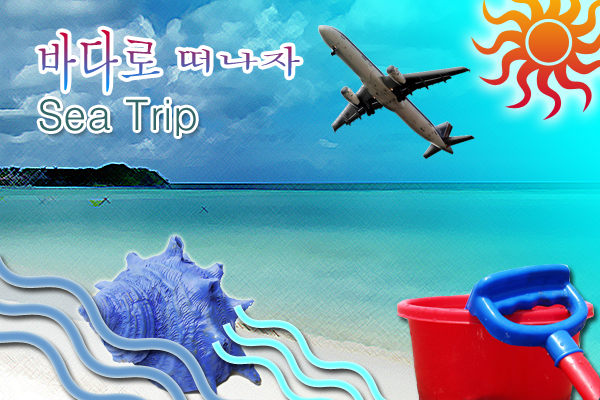
<style>
.page{position:relative;width:600px;height:400px}
.page>*{position:absolute;margin:0}
.t1{font:42px "Batang"}
.t2{font:42px "Dotum";color:#336666}
</style>
<div class="page">
<p class="t1" style="left:38px;top:29px;width:262px;height:63px">바다로 떠나자</p>
<p class="t2" style="left:39px;top:99px;width:157px;height:37px">Sea Trip</p>
</div>
